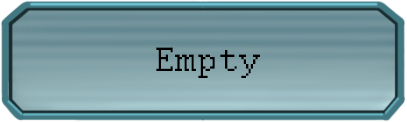
<style>
.page{position:relative;width:407px;height:122px}
.page>*{position:absolute;margin:0}
.t1{font:37.5px "Courier";color:#000000}
</style>
<div class="page">
<p class="t1" style="left:156px;top:47px;width:104px;height:31px">Empty</p>
</div>
